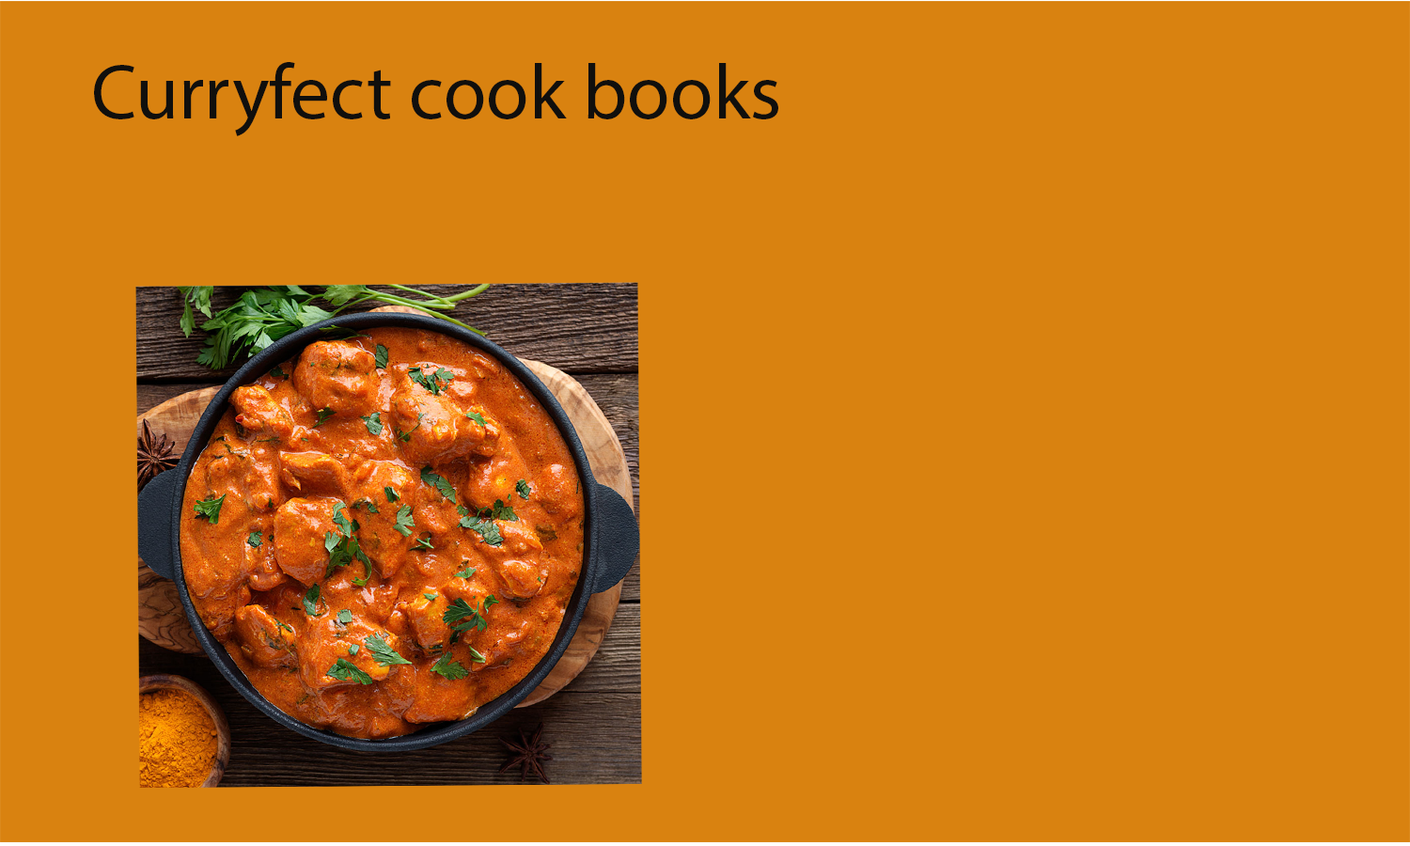
<style>
.page{position:relative;width:1410px;height:846px;background:#d98210}
.page>*{position:absolute;margin:0}
.t1{font:78.3px "MyriadPro-Regular";color:#100f0d}
</style>
<div class="page">
<p class="t1" style="left:94px;top:62px;width:684px;height:74px">Curryfect cook books</p>
</div>
